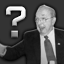
<style>
.page{position:relative;width:64px;height:64px}
.page>*{position:absolute;margin:0}
.t1{font:44px "Aldrich"}
</style>
<div class="page">
<p class="t1" style="left:6px;top:6px;width:20px;height:32px">?</p>
</div>
